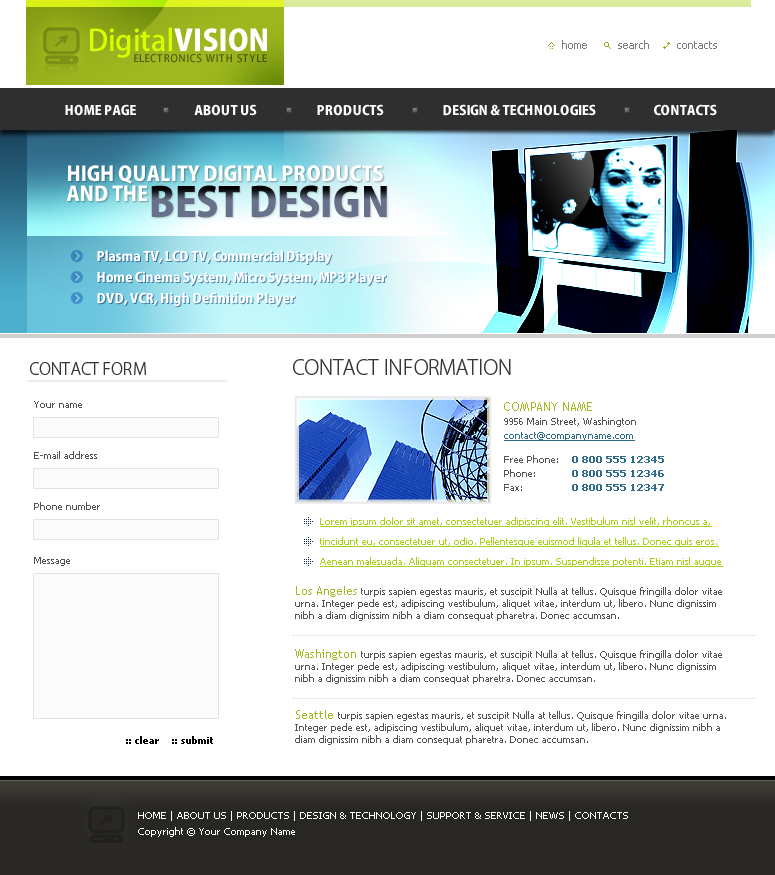
<style>
.page{position:relative;width:775px;height:875px;background:#ffffff}
.page>*{position:absolute;margin:0}
.t1{font:29px "KozGoPro-Medium";color:#d6ff00}
.t2{font:29px "KozGoPro-Heavy";color:#ffffff}
.t3{font:11px "Tahoma";color:#7b7b7b}
.t4{font:10px "KozGoPro-Medium";letter-spacing:0.08em;color:#4e5b0f}
.t5{font:13px "KozGoPro-Heavy";color:#ffffff}
.t6{font:20px "KozGoPro-Heavy";color:#ffffff}
.t7{font:40px "KozGoPro-Heavy"}
.t8{font:16px "KozGoPro-Light";color:#363636}
.t9{font:20px "KozGoPro-Light";color:#363636}
.t10{font:10px "Tahoma";color:#535353}
.t11{font:10px/14px "Tahoma";color:#535353}
.t12{font:12px/16px "TrebuchetMS";color:#a0b920}
.t13{font:10px/14px "Tahoma";color:#306b89;text-decoration:underline}
.t14{font:10px/14px "Tahoma-Bold";color:#306b89}
.t15{font:10px/20px "Tahoma";color:#a8d217;text-decoration:underline}
.t16{font:10px/12px "Tahoma";color:#535353}
.t17{font:12px/14px "TrebuchetMS";color:#a0b920}
.t18{font:10px "Tahoma";color:#e5e5e5}
.t19{font:10px "Tahoma-Bold";color:#000000}
.t20{font:10px/16px "Tahoma";color:#ffffff}
</style>
<div class="page">
<p class="t1" style="left:90px;top:27px;width:177px;height:31px">Digital<span class="t2">VISION</span></p>
<p class="t3" style="left:562px;top:40px;width:25px;height:9px">home</p>
<p class="t3" style="left:618px;top:40px;width:31px;height:9px">search</p>
<p class="t3" style="left:677px;top:41px;width:40px;height:8px">contacts</p>
<p class="t4" style="left:134px;top:54px;width:133px;height:9px">ELECTRONICS WITH STYLE</p>
<p class="t5" style="left:65px;top:104px;width:71px;height:12px">HOME PAGE</p>
<p class="t5" style="left:194px;top:104px;width:63px;height:12px">ABOUT US</p>
<p class="t5" style="left:317px;top:104px;width:67px;height:12px">PRODUCTS</p>
<p class="t5" style="left:443px;top:104px;width:153px;height:12px">DESIGN &amp; TECHNOLOGIES</p>
<p class="t5" style="left:654px;top:104px;width:63px;height:12px">CONTACTS</p>
<p class="t6" style="left:68px;top:165px;width:315px;height:19px">HIGH QUALITY DIGITAL PRODUCTS</p>
<p class="t6" style="left:66px;top:185px;width:82px;height:17px">AND THE</p>
<p class="t7" style="left:151px;top:185px;width:236px;height:33px">BEST DESIGN</p>
<p class="t5" style="left:97px;top:250px;width:235px;height:15px">Plasma TV, LCD TV, Commercial Display</p>
<p class="t5" style="left:97px;top:271px;width:289px;height:15px">Home Cinema System, Micro System, MP3 Player</p>
<p class="t5" style="left:97px;top:292px;width:198px;height:15px">DVD, VCR, High Definition Player</p>
<p class="t8" style="left:30px;top:362px;width:116px;height:13px">CONTACT FORM</p>
<p class="t9" style="left:293px;top:359px;width:218px;height:16px">CONTACT INFORMATION</p>
<p class="t10" style="left:34px;top:401px;width:48px;height:7px">Your name</p>
<p class="t11" style="left:504px;top:402px;width:132px;height:39px"><span class="t12">COMPANY NAME<br></span>9956 Main Street, Washington<br><span class="t13">contact@companyname.com</span></p>
<p class="t10" style="left:34px;top:451px;width:63px;height:8px">E-mail address</p>
<p class="t11" style="left:504px;top:455px;width:54px;height:36px">Free Phone:<br>Phone:<br>Fax:</p>
<p class="t14" style="left:572px;top:456px;width:92px;height:35px;text-align:right">0 800 555 12345<br>0 800 555 12346<br>0 800 555 12347</p>
<p class="t10" style="left:34px;top:502px;width:66px;height:8px">Phone number</p>
<p class="t15" style="left:320px;top:517px;width:403px;height:50px">Lorem ipsum dolor sit amet, consectetuer adipiscing elit. Vestibulum nisl velit, rhoncus a, tincidunt eu, consectetuer ut, odio. Pellentesque euismod ligula et tellus. Donec quis eros. Aenean malesuada. Aliquam consectetuer. In ipsum. Suspendisse potenti. Etiam nisl augue</p>
<p class="t10" style="left:34px;top:557px;width:36px;height:9px">Message</p>
<p class="t16" style="left:295px;top:586px;width:427px;height:35px"><span class="t17">Los Angeles</span> turpis sapien egestas mauris, et suscipit Nulla at tellus. Quisque fringilla dolor vitae urna. Integer pede est, adipiscing vestibulum, aliquet vitae, interdum ut, libero. Nunc dignissim nibh a diam dignissim nibh a diam consequat pharetra. Donec accumsan.</p>
<p class="t18" style="left:292px;top:635px;width:463px;height:1px">--------------------------------------------------------------------------------------------------------------------</p>
<p class="t16" style="left:295px;top:649px;width:427px;height:35px"><span class="t17">Washington </span>turpis sapien egestas mauris, et suscipit Nulla at tellus. Quisque fringilla dolor vitae urna. Integer pede est, adipiscing vestibulum, aliquet vitae, interdum ut, libero. Nunc dignissim nibh a dignissim nibh a diam consequat pharetra. Donec accumsan.</p>
<p class="t18" style="left:292px;top:698px;width:463px;height:1px">--------------------------------------------------------------------------------------------------------------------</p>
<p class="t16" style="left:295px;top:710px;width:431px;height:35px"><span class="t17">Seattle </span>turpis sapien egestas mauris, et suscipit Nulla at tellus. Quisque fringilla dolor vitae urna. Integer pede est, adipiscing vestibulum, aliquet vitae, interdum ut, libero. Nunc dignissim nibh a diam dignissim nibh a diam consequat pharetra. Donec accumsan.</p>
<p class="t19" style="left:126px;top:736px;width:87px;height:8px">:: clear    :: submit</p>
<p class="t20" style="left:138px;top:811px;width:490px;height:26px">HOME | ABOUT US | PRODUCTS | DESIGN &amp; TECHNOLOGY | SUPPORT &amp; SERVICE | NEWS | CONTACTS<br>Copyright © Your Company Name</p>
</div>
